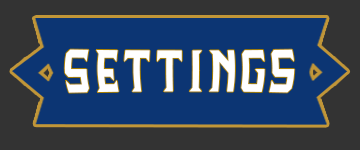
<style>
.page{position:relative;width:360px;height:150px;background:#0c3573}
.page>*{position:absolute;margin:0}
.t1{font:62.5px "Lorde-Havana";letter-spacing:0.1em;color:#ffffff;scale:0.75 1}
</style>
<div class="page">
<p class="t1" style="left:64px;top:49px;width:231px;height:44px">Settings</p>
</div>
